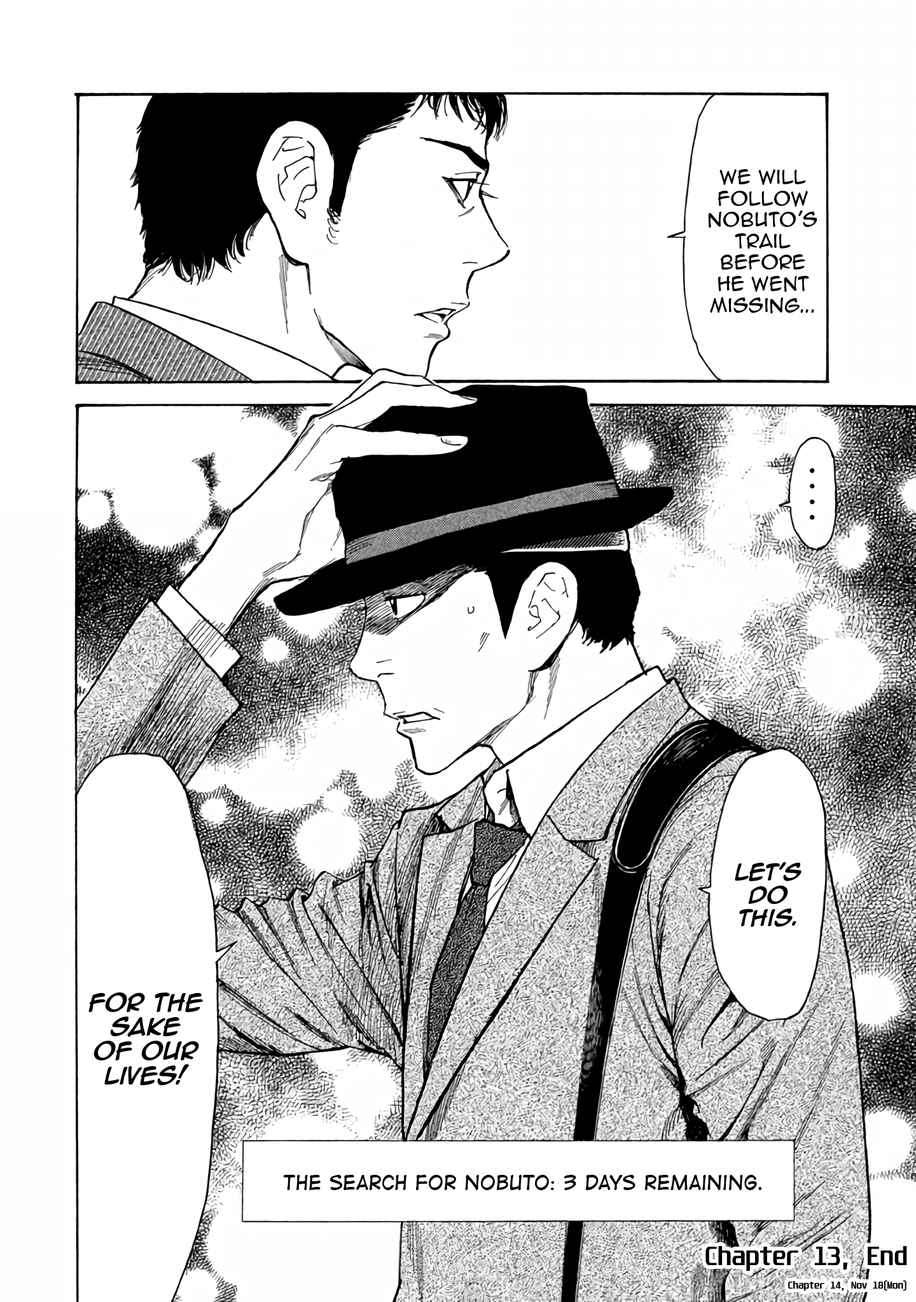
<style>
.page{position:relative;width:916px;height:1302px;background:#ffffff}
.page>*{position:absolute;margin:0}
.t1{font:17.8px "AnimeAce2.0BB";color:#000000}
.t2{font:19.1px "AnimeAce2.0BB-Bold";color:#000000}
.t3{font:20.3px "AnimeAce2.0BB-Bold";color:#000000}
.t4{font:19.1px "DigitalStrip";color:#000000}
.t5{font:15.3px "Unispace-Bold";color:#000000}
.t6{font:22.9px "Unispace-Bold";color:#000000}
</style>
<div class="page">
<p class="t1" style="left:708px;top:169px;width:109px;height:144px;text-align:center">We will follow Nobuto’s trail before he went missing...</p>
<p class="t2" style="left:734px;top:862px;width:67px;height:65px;text-align:center">Let’s do this.</p>
<p class="t3" style="left:88px;top:993px;width:115px;height:92px;text-align:center">For the sake of our lives!</p>
<p class="t4" style="left:283px;top:1175px;width:479px;height:15px">the search for nobuto: 3 days remaining.</p>
<p class="t5" style="left:705px;top:1246px;width:202px;height:45px;text-align:right"><span class="t6">Chapter 13, End<br></span>Chapter 14, Nov 18(Mon)</p>
</div>
